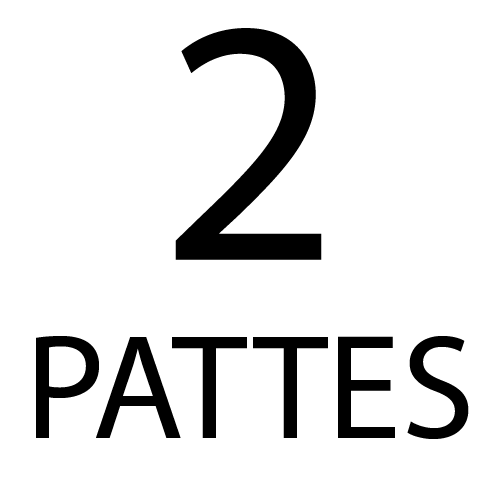
<style>
.page{position:relative;width:500px;height:500px;background:#ffffff}
.page>*{position:absolute;margin:0}
.t1{font:350px "MyriadPro-Regular";color:#000000}
.t2{font:150px "MyriadPro-Regular";color:#000000}
</style>
<div class="page">
<p class="t1" style="left:175px;top:28px;width:147px;height:232px">2</p>
<p class="t2" style="left:36px;top:336px;width:433px;height:103px">PATTES</p>
</div>
